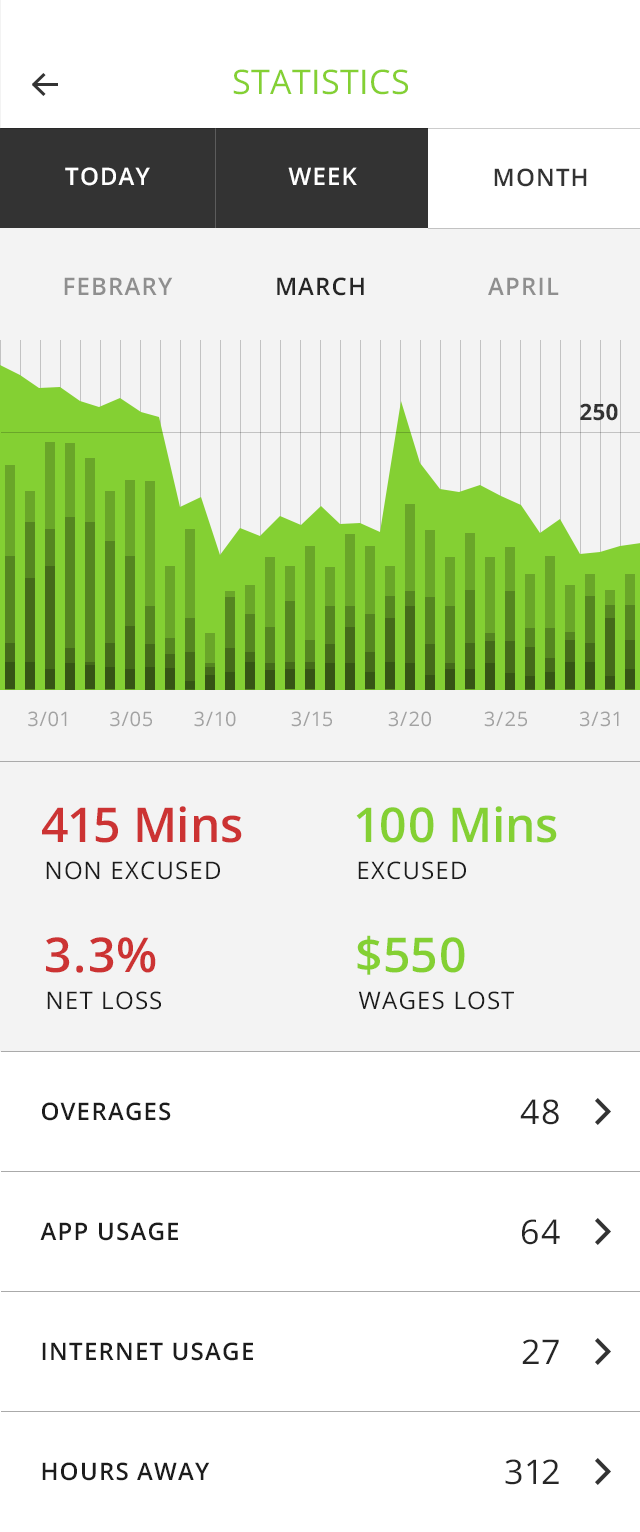
<style>
.page{position:relative;width:640px;height:1532px;background:#ffffff}
.page>*{position:absolute;margin:0}
.t1{font:34px "OpenSans";letter-spacing:0.01em;color:#84d033;text-transform:uppercase}
.t2{font:24px "OpenSans-Semibold";letter-spacing:0.05em;color:#ffffff;text-transform:uppercase}
.t3{font:24px "OpenSans-Semibold";letter-spacing:0.05em;color:#333333;text-transform:uppercase}
.t4{font:24px "OpenSans-Semibold";letter-spacing:0.05em;color:#8f8f8f;text-transform:uppercase}
.t5{font:24px "OpenSans-Semibold";letter-spacing:0.05em;color:#262626;text-transform:uppercase}
.t6{font:22.6px "OpenSans-Bold";letter-spacing:0.01em;color:#333333}
.t7{font:20px "OpenSans";color:#a2a2a2}
.t8{font:48px "OpenSans-Semibold";color:#cc3333}
.t9{font:48px "OpenSans-Semibold";color:#84d033}
.t10{font:24px "OpenSans";letter-spacing:0.05em;color:#1c1c1c;text-transform:uppercase}
.t11{font:24px "OpenSans-Semibold";letter-spacing:0.05em;color:#1c1c1c;text-transform:uppercase}
.t12{font:34px "OpenSans";color:#262626}
</style>
<div class="page">
<p class="t1" style="left:233px;top:69px;width:175px;height:26px">Statistics</p>
<p class="t2" style="left:65px;top:167px;width:85px;height:19px">today</p>
<p class="t2" style="left:288px;top:167px;width:69px;height:18px">week</p>
<p class="t3" style="left:494px;top:168px;width:93px;height:19px">month</p>
<p class="t4" style="left:64px;top:277px;width:109px;height:18px">febrary</p>
<p class="t5" style="left:277px;top:277px;width:87px;height:19px">march</p>
<p class="t4" style="left:488px;top:277px;width:71px;height:18px">APRIL</p>
<p class="t6" style="left:580px;top:403px;width:38px;height:18px">250</p>
<p class="t7" style="left:28px;top:711px;width:39px;height:16px">3/01</p>
<p class="t7" style="left:110px;top:711px;width:42px;height:16px">3/05</p>
<p class="t7" style="left:194px;top:711px;width:42px;height:16px">3/10</p>
<p class="t7" style="left:291px;top:711px;width:41px;height:16px">3/15</p>
<p class="t7" style="left:388px;top:711px;width:43px;height:16px">3/20</p>
<p class="t7" style="left:484px;top:711px;width:43px;height:16px">3/25</p>
<p class="t7" style="left:580px;top:711px;width:39px;height:16px">3/31</p>
<p class="t8" style="left:42px;top:806px;width:200px;height:37px">415 Mins</p>
<p class="t9" style="left:356px;top:806px;width:201px;height:37px">100 Mins</p>
<p class="t10" style="left:46px;top:861px;width:174px;height:19px">NON EXCUSED</p>
<p class="t10" style="left:358px;top:861px;width:108px;height:19px">EXCUSED</p>
<p class="t8" style="left:46px;top:937px;width:110px;height:36px">3.3%</p>
<p class="t9" style="left:357px;top:935px;width:108px;height:40px">$550</p>
<p class="t10" style="left:47px;top:991px;width:114px;height:19px">NET LOSS</p>
<p class="t10" style="left:358px;top:991px;width:156px;height:19px">WAGES LOST</p>
<p class="t11" style="left:42px;top:1102px;width:129px;height:19px">OVERAGES</p>
<p class="t12" style="left:520px;top:1099px;width:39px;height:26px">48</p>
<p class="t11" style="left:40px;top:1222px;width:138px;height:19px">APP USAGE</p>
<p class="t12" style="left:522px;top:1219px;width:38px;height:26px">64</p>
<p class="t11" style="left:42px;top:1342px;width:211px;height:19px">INTERNET USAGE</p>
<p class="t12" style="left:522px;top:1339px;width:37px;height:25px">27</p>
<p class="t11" style="left:42px;top:1462px;width:168px;height:19px">HOURS AWAY</p>
<p class="t12" style="left:505px;top:1459px;width:54px;height:26px">312</p>
</div>
